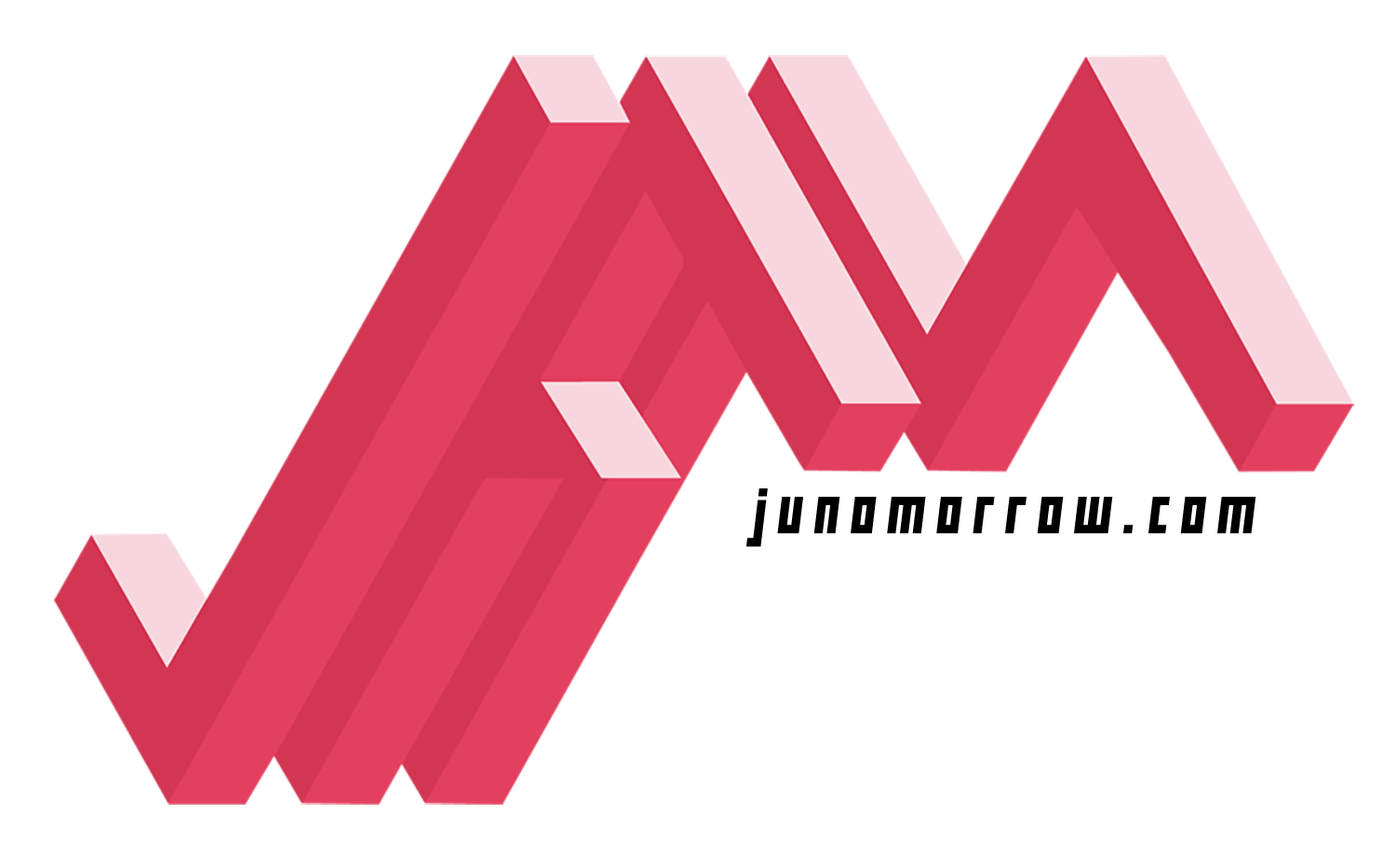
<style>
.page{position:relative;width:1396px;height:854px;background:#ffffff}
.page>*{position:absolute;margin:0}
.t1{font:54.3px "Buran-USSR";letter-spacing:0.2em;color:#000000}
</style>
<div class="page">
<p class="t1" style="left:746px;top:489px;width:510px;height:58px">junomorrow.com</p>
</div>
